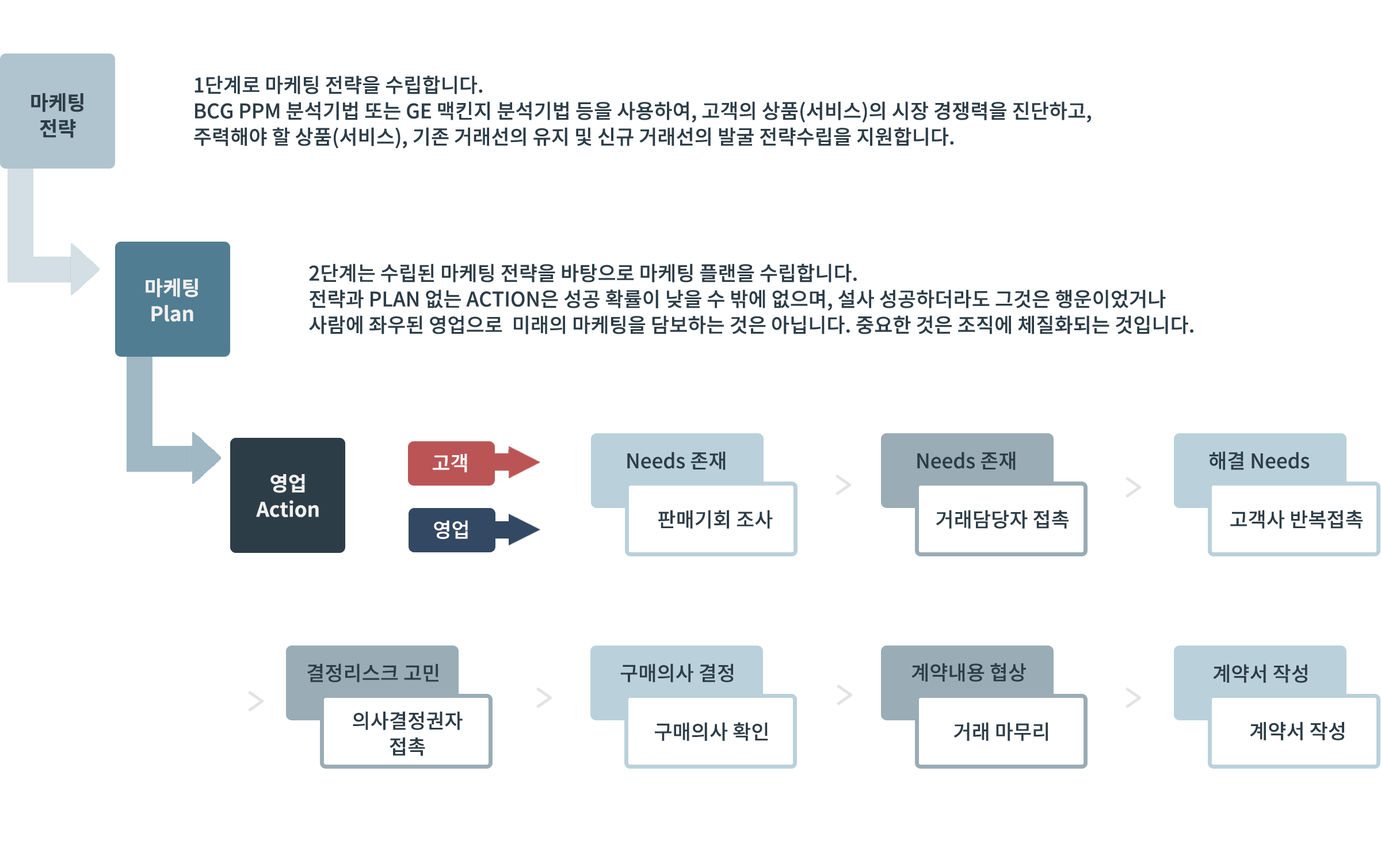
<style>
.page{position:relative;width:1381px;height:863px;background:#ffffff}
.page>*{position:absolute;margin:0}
.t1{font:20.1px/25.9px "NotoSansCJKkr-Medium";color:#2d3d47}
.t2{font:20.1px/25.9px "NotoSansCJKkr-Bold";color:#2d3d47}
.t3{font:20.1px/25.9px "NotoSansCJKkr-Bold";color:#f0f0f0}
.t4{font:20.1px "NotoSansCJKkr-Medium";color:#ffffff}
.t5{font:20.1px "NotoSansCJKkr-Medium";color:#2d3d47}
</style>
<div class="page">
<p class="t1" style="left:194px;top:75px;width:897px;height:73px">1단계로 마케팅 전략을 수립합니다. <br>BCG PPM 분석기법 또는 GE 맥킨지 분석기법 등을 사용하여, 고객의 상품(서비스)의 시장 경쟁력을 진단하고, <br>주력해야 할 상품(서비스), 기존 거래선의 유지 및 신규 거래선의 발굴 전략수립을 지원합니다.</p>
<p class="t2" style="left:31px;top:93px;width:52px;height:45px;text-align:center">마케팅<br>전략</p>
<p class="t1" style="left:309px;top:264px;width:885px;height:70px">2단계는 수립된 마케팅 전략을 바탕으로 마케팅 플랜을 수립합니다. <br>전략과 PLAN 없는 ACTION은성공 확률이 낮을 수 밖에 없으며, 설사 성공하더라도 그것은 행운이었거나 <br>사람에 좌우된 영업으로 미래의 마케팅을 담보하는 것은 아닙니다. 중요한 것은 조직에 체질화되는 것입니다.</p>
<p class="t3" style="left:146px;top:278px;width:52px;height:44px;text-align:center">마케팅<br>Plan</p>
<p class="t4" style="left:433px;top:454px;width:34px;height:19px">고객</p>
<p class="t5" style="left:627px;top:451px;width:99px;height:19px">Needs 존재</p>
<p class="t5" style="left:917px;top:451px;width:99px;height:19px">Needs 존재</p>
<p class="t5" style="left:1209px;top:451px;width:101px;height:19px">해결 Needs</p>
<p class="t3" style="left:256px;top:474px;width:63px;height:43px;text-align:center">영업<br>Action</p>
<p class="t5" style="left:658px;top:510px;width:115px;height:19px">판매기회 조사</p>
<p class="t5" style="left:936px;top:510px;width:133px;height:19px">거래담당자 접촉</p>
<p class="t5" style="left:1230px;top:510px;width:133px;height:19px">고객사 반복접촉</p>
<p class="t4" style="left:434px;top:520px;width:34px;height:19px">영업</p>
<p class="t5" style="left:307px;top:664px;width:132px;height:19px">결정리스크 고민</p>
<p class="t5" style="left:620px;top:664px;width:114px;height:19px">구매의사 결정</p>
<p class="t5" style="left:912px;top:663px;width:114px;height:19px">계약내용 협상</p>
<p class="t5" style="left:1213px;top:664px;width:95px;height:19px">계약서 작성</p>
<p class="t1" style="left:353px;top:711px;width:110px;height:45px;text-align:center">의사결정권자<br>접촉</p>
<p class="t5" style="left:655px;top:722px;width:113px;height:19px">구매의사 확인</p>
<p class="t5" style="left:954px;top:722px;width:94px;height:19px">거래 마무리</p>
<p class="t5" style="left:1250px;top:722px;width:94px;height:19px">계약서 작성</p>
</div>
